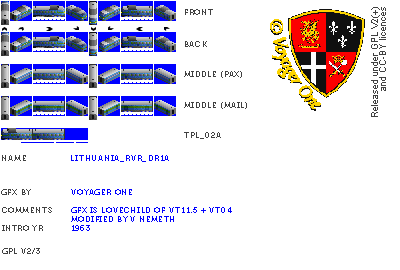
<style>
.page{position:relative;width:400px;height:270px;background:#ffffff}
.page>*{position:absolute;margin:0}
.t1{font:8px "Museo700-Regular";letter-spacing:0.075em;color:#404040;text-transform:uppercase}
.t2{font:8px "Museo700-Regular";letter-spacing:0.075em;color:#0000ff;text-transform:uppercase}
</style>
<div class="page">
<p class="t1" style="left:185px;top:9px;width:28px;height:6px">front</p>
<p class="t1" style="left:185px;top:41px;width:22px;height:6px">back</p>
<p class="t1" style="left:184px;top:71px;width:58px;height:7px">middle (pax)</p>
<p class="t1" style="left:184px;top:102px;width:63px;height:7px">middle (mail)</p>
<p class="t1" style="left:184px;top:132px;width:37px;height:7px">tpl_02a</p>
<p class="t1" style="left:2px;top:155px;width:24px;height:6px">name</p>
<p class="t2" style="left:71px;top:155px;width:98px;height:7px">Lithuania_RVR_DR1A</p>
<p class="t1" style="left:1px;top:189px;width:30px;height:6px">gfx by</p>
<p class="t2" style="left:71px;top:189px;width:61px;height:6px">voyager one</p>
<p class="t1" style="left:2px;top:207px;width:50px;height:6px">comments</p>
<p class="t2" style="left:71px;top:207px;width:161px;height:15px">gfx is lovechild of vt11.5 + vt04<br>modified by v nemeth</p>
<p class="t1" style="left:2px;top:225px;width:41px;height:6px">intro yr</p>
<p class="t2" style="left:72px;top:225px;width:18px;height:6px">1963</p>
<p class="t1" style="left:2px;top:248px;width:38px;height:6px">gpl v2/3</p>
</div>
